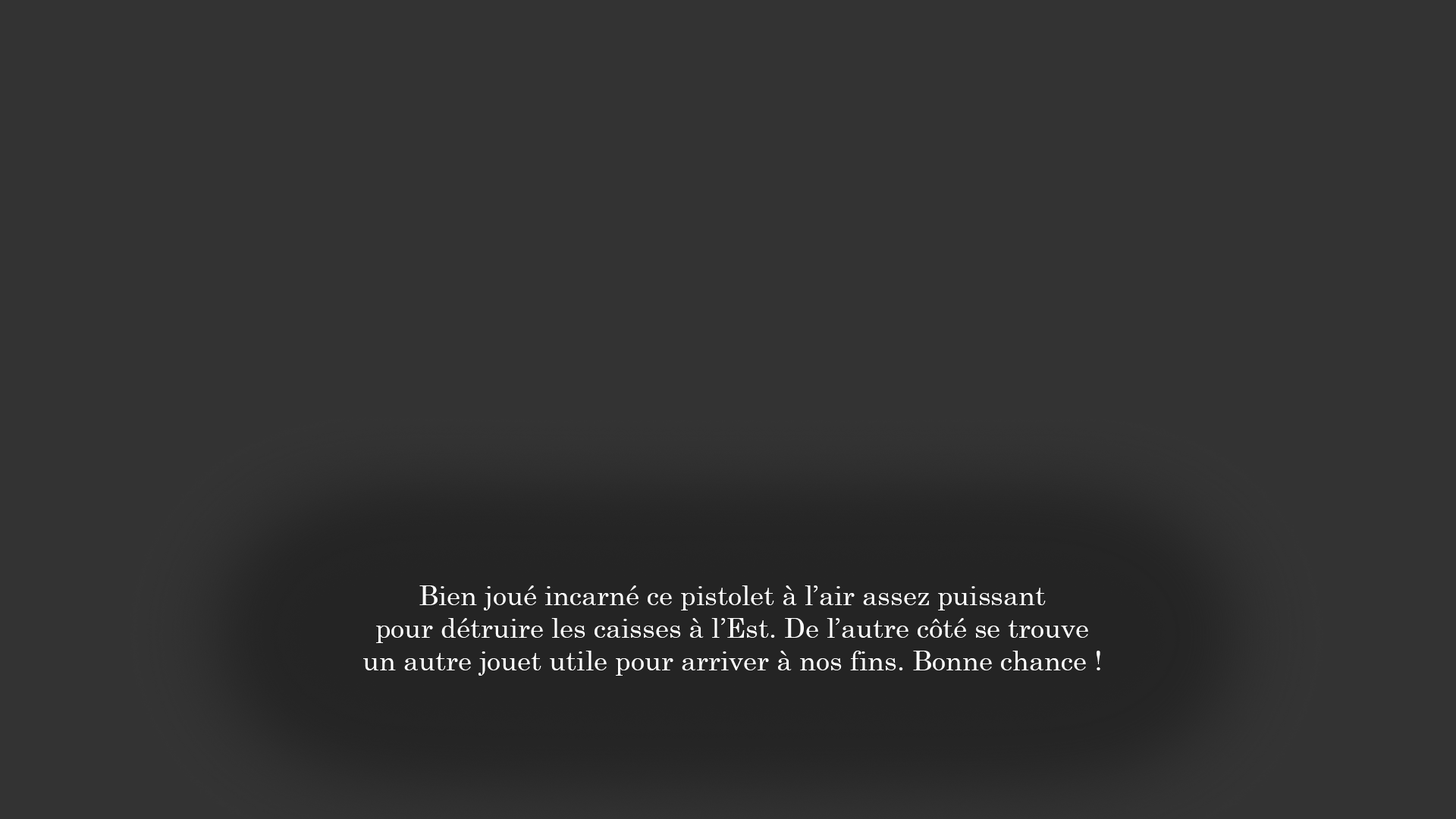
<style>
.page{position:relative;width:1456px;height:819px;background:#333333}
.page>*{position:absolute;margin:0}
.t1{font:27.3px "Century";color:#ffffff}
</style>
<div class="page">
<p class="t1" style="left:363px;top:585px;width:737px;height:91px;text-align:center">Bien joué incarné ce pistolet à l’air assez puissant<br>pour détruire les caisses à l’Est. De l’autre côté se trouve<br>un autre jouet utile pour arriver à nos fins. Bonne chance !</p>
</div>
